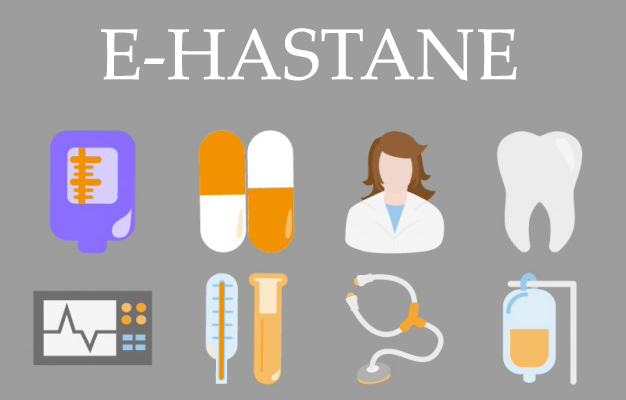
<style>
.page{position:relative;width:626px;height:400px;background:#9d9d9d}
.page>*{position:absolute;margin:0}
.t1{font:72px "PalatinoLinotype-Roman";color:#ffffff}
</style>
<div class="page">
<p class="t1" style="left:101px;top:28px;width:416px;height:53px">E-HASTANE</p>
</div>
